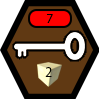
<style>
.page{position:relative;width:99px;height:99px;background:#603913}
.page>*{position:absolute;margin:0}
.t1{font:12.5px "KozGoPr6N-Regular";color:#000000}
</style>
<div class="page">
<p class="t1" style="left:47px;top:14px;width:6px;height:9px">7</p>
<p class="t1" style="left:45px;top:67px;width:7px;height:10px">2</p>
</div>
